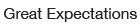
<style>
.page{position:relative;width:140px;height:28px;background:#ffffff}
.page>*{position:absolute;margin:0}
.t1{font:15.6px "HelveticaNeue";color:#242424}
</style>
<div class="page">
<p class="t1" style="left:4px;top:8px;width:133px;height:14px">Great Expectations</p>
</div>
